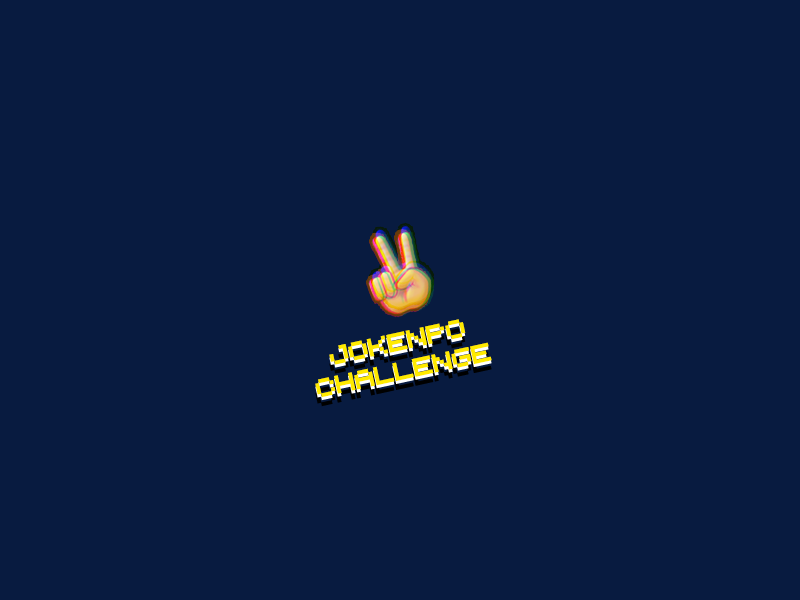
<style>
.page{position:relative;width:800px;height:600px;background:#081b40}
.page>*{position:absolute;margin:0}
.t1{font:24.7px/29px "RetroComputer";letter-spacing:-0.04em;color:#ffea00}
</style>
<div class="page">
<p class="t1" style="left:315px;top:319px;width:177px;height:79px;text-align:center;rotate:-12deg">jokenpo<br>challenge</p>
</div>
